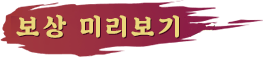
<style>
.page{position:relative;width:263px;height:57px;background:#ffffff}
.page>*{position:absolute;margin:0}
.t1{font:25.2px "SDKukdetopokki-bBd";letter-spacing:0.12em;color:#ead67b}
</style>
<div class="page">
<p class="t1" style="left:16px;top:14px;width:163px;height:24px">보상 미리보기</p>
</div>
